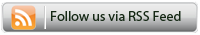
<style>
.page{position:relative;width:200px;height:35px}
.page>*{position:absolute;margin:0}
.t1{font:14px "MyriadPro-Regular"}
.t2{font:14px "MyriadPro-Regular";color:#152815}
</style>
<div class="page">
<p class="t1" style="left:50px;top:11px;width:133px;height:10px">Follow us on FaceBook</p>
<p class="t1" style="left:51px;top:11px;width:129px;height:10px">Follow us on YouTube</p>
<p class="t1" style="left:51px;top:11px;width:125px;height:10px">Follow us on LinkedIn</p>
<p class="t1" style="left:51px;top:11px;width:118px;height:10px">Follow us on Twitter</p>
<p class="t2" style="left:51px;top:11px;width:130px;height:10px">Follow us via RSS Feed</p>
</div>
